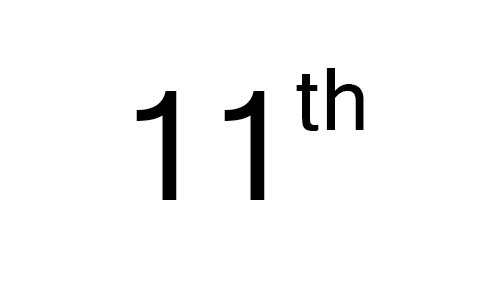
<style>
.page{position:relative;width:500px;height:300px;background:#ffffff}
.page>*{position:absolute;margin:0}
.t1{font:150px "MicrosoftSansSerif";letter-spacing:0.025em;color:#000000}
</style>
<div class="page">
<p class="t1" style="left:136px;top:68px;width:228px;height:132px">11th</p>
</div>
